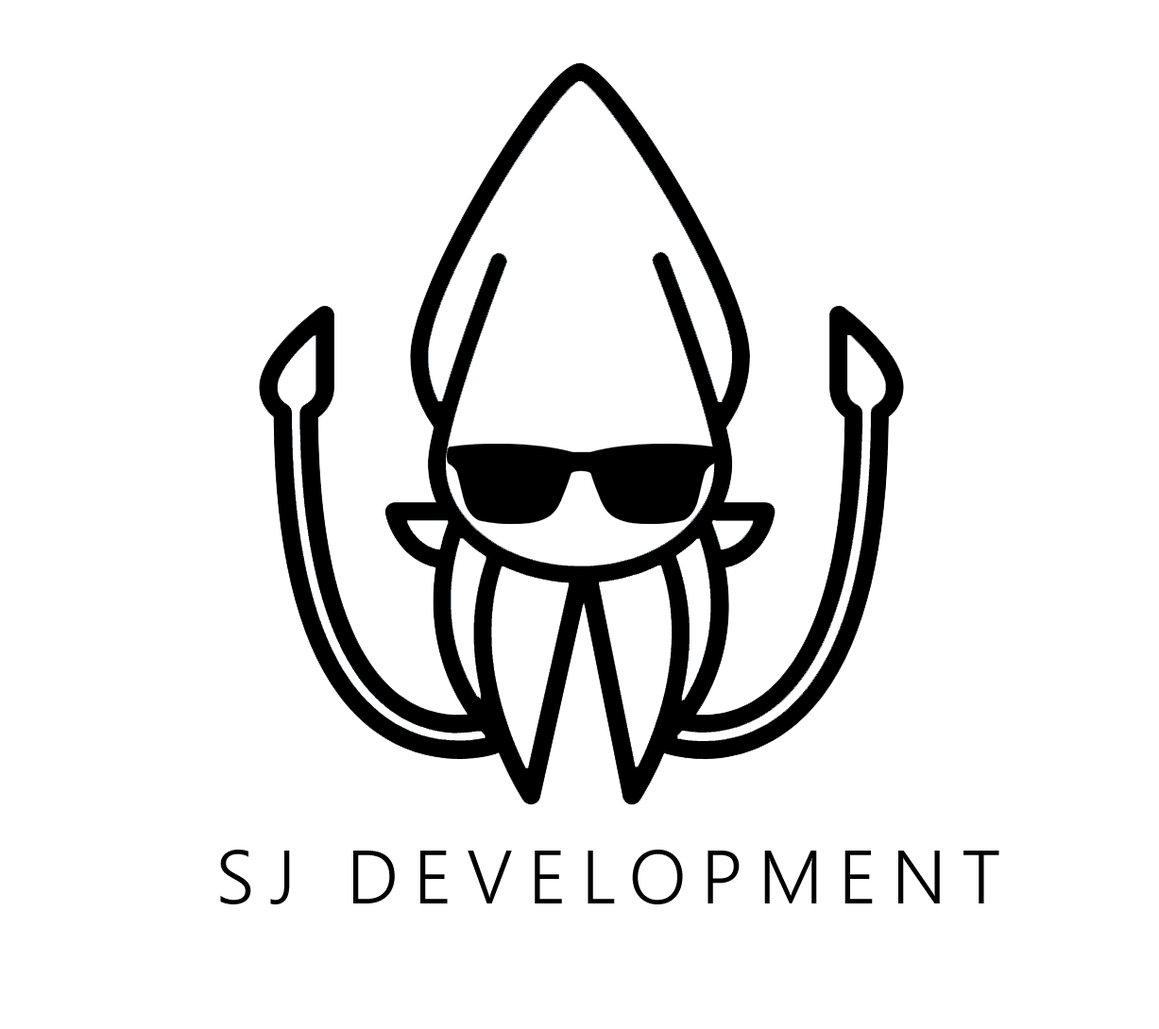
<style>
.page{position:relative;width:1159px;height:1029px;background:#ffffff}
.page>*{position:absolute;margin:0}
.t1{font:75.5px "SegoeUI-Semilight";letter-spacing:0.2em;color:#000000}
</style>
<div class="page">
<p class="t1" style="left:220px;top:850px;width:779px;height:55px">SJ DEVELOPMENT</p>
</div>
